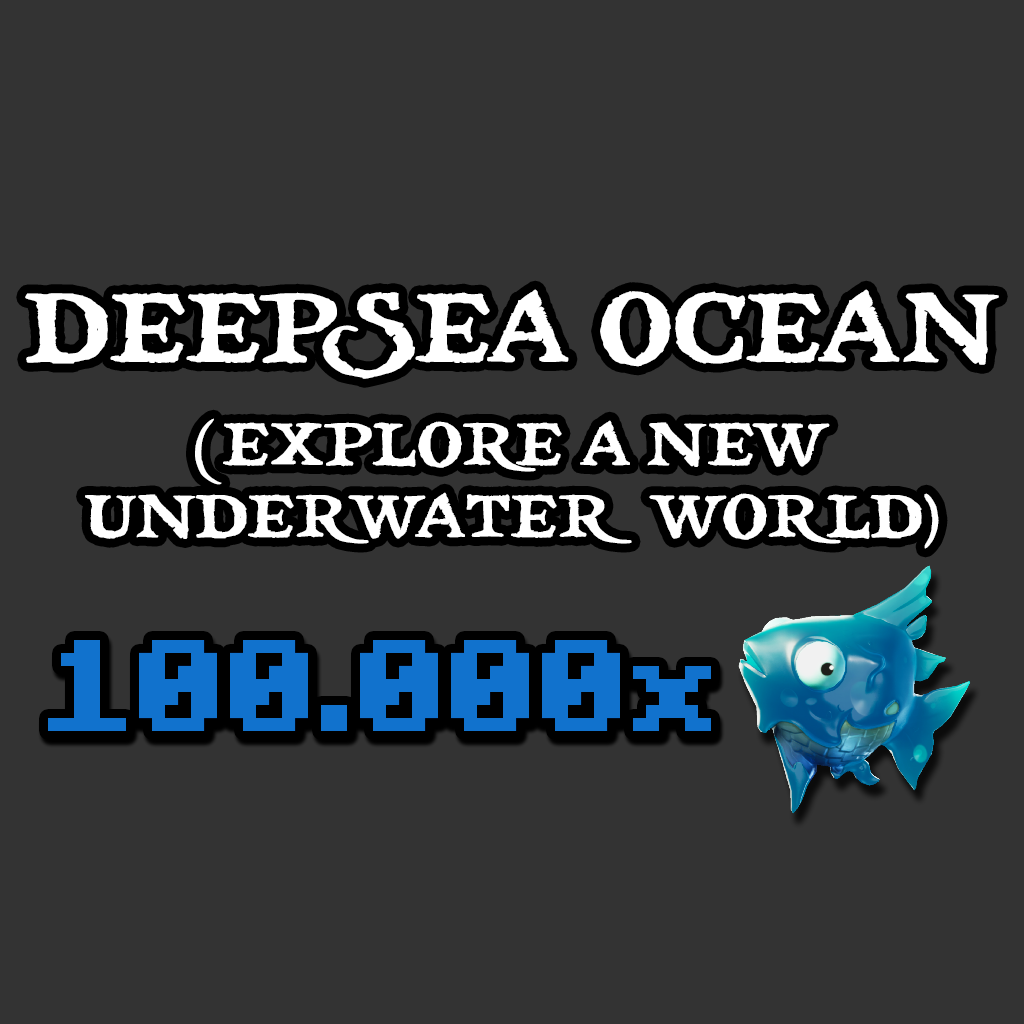
<style>
.page{position:relative;width:1024px;height:1024px;background:#333333}
.page>*{position:absolute;margin:0}
.t1{font:97.4px "treasuremap";color:#ffffff}
.t2{font:60px "treasuremap";color:#ffffff}
.t3{font:130px "Minecraft-Bold";color:#1172cd}
</style>
<div class="page">
<p class="t1" style="left:25px;top:289px;width:974px;height:90px">DEEPSEA OCEAN</p>
<p class="t2" style="left:85px;top:418px;width:854px;height:131px;text-align:center">(EXPLORE A NEW<br>UNDERWATER WORLD)</p>
<p class="t3" style="left:48px;top:640px;width:663px;height:91px">100.000x</p>
</div>
